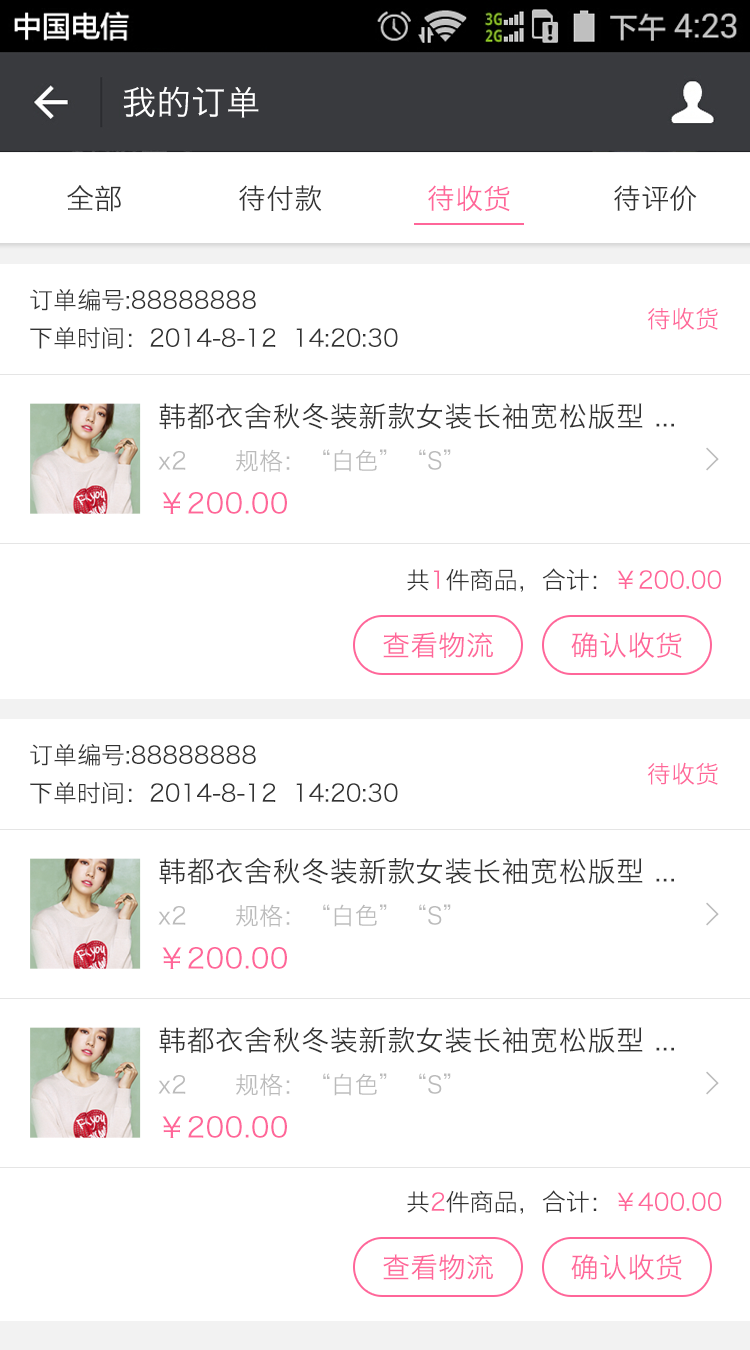
<style>
.page{position:relative;width:750px;height:1350px;background:#ffffff}
.page>*{position:absolute;margin:0}
.t1{font:34px "HiraginoSansGB-W3";letter-spacing:0.022em;color:#ffffff}
.t2{font:28px "HiraginoSansGB-W3";color:#333333}
.t3{font:28px "HiraginoSansGB-W3";color:#ff6699}
.t4{font:24px/36px "HiraginoSansGB-W3";color:#333333}
.t5{font:24px "HiraginoSansGB-W3";color:#ff6699}
.t6{font:28px "HiraginoSansGB-W3";letter-spacing:0.022em;color:#333333}
.t7{font:24px "HiraginoSansGB-W3";color:#bbbbbb}
.t8{font:32px "SimSun";color:#bbbbbb;font-weight:bold}
.t9{font:28px "HiraginoSansGB-W3";letter-spacing:0.022em;color:#ff6699}
.t10{font:24px "HiraginoSansGB-W3";color:#333333}
</style>
<div class="page">
<p class="t1" style="left:123px;top:86px;width:136px;height:32px">我的订单</p>
<p class="t2" style="left:67px;top:185px;width:54px;height:27px">全部</p>
<p class="t2" style="left:239px;top:185px;width:83px;height:27px">待付款</p>
<p class="t3" style="left:428px;top:185px;width:82px;height:27px">待收货</p>
<p class="t2" style="left:614px;top:185px;width:83px;height:26px">待评价</p>
<p class="t4" style="left:30px;top:288px;width:368px;height:61px">订单编号:88888888<br>下单时间：2014-8-12  14:20:30</p>
<p class="t5" style="left:647px;top:307px;width:71px;height:23px">待收货</p>
<p class="t6" style="left:159px;top:402px;width:515px;height:27px">韩都衣舍秋冬装新款女装长袖宽松版型 ...</p>
<p class="t7" style="left:158px;top:449px;width:293px;height:23px">x2      规格：“白色”“S”</p>
<p class="t8" style="left:706px;top:447px;width:13px;height:24px">&gt;</p>
<p class="t9" style="left:162px;top:492px;width:125px;height:22px">￥200.00</p>
<p class="t10" style="left:407px;top:568px;width:314px;height:24px">共<span class="t5">1</span>件商品，合计：<span class="t5">￥200.00</span></p>
<p class="t3" style="left:383px;top:632px;width:110px;height:26px">查看物流</p>
<p class="t3" style="left:571px;top:632px;width:111px;height:26px">确认收货</p>
<p class="t4" style="left:30px;top:743px;width:368px;height:61px">订单编号:88888888<br>下单时间：2014-8-12  14:20:30</p>
<p class="t5" style="left:647px;top:762px;width:71px;height:23px">待收货</p>
<p class="t6" style="left:159px;top:857px;width:515px;height:27px">韩都衣舍秋冬装新款女装长袖宽松版型 ...</p>
<p class="t7" style="left:158px;top:904px;width:293px;height:23px">x2      规格：“白色”“S”</p>
<p class="t8" style="left:706px;top:902px;width:13px;height:24px">&gt;</p>
<p class="t9" style="left:162px;top:947px;width:125px;height:22px">￥200.00</p>
<p class="t6" style="left:159px;top:1026px;width:515px;height:27px">韩都衣舍秋冬装新款女装长袖宽松版型 ...</p>
<p class="t7" style="left:158px;top:1073px;width:293px;height:23px">x2      规格：“白色”“S”</p>
<p class="t8" style="left:706px;top:1071px;width:13px;height:24px">&gt;</p>
<p class="t9" style="left:162px;top:1116px;width:125px;height:22px">￥200.00</p>
<p class="t10" style="left:407px;top:1190px;width:315px;height:24px">共<span class="t5">2</span>件商品，合计：<span class="t5">￥400.00</span></p>
<p class="t3" style="left:383px;top:1254px;width:110px;height:26px">查看物流</p>
<p class="t3" style="left:571px;top:1254px;width:111px;height:26px">确认收货</p>
</div>
